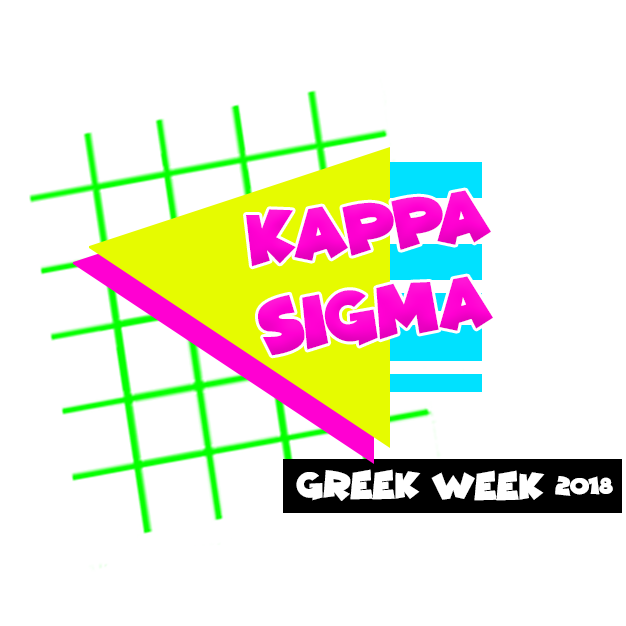
<style>
.page{position:relative;width:626px;height:626px;background:#ffffff}
.page>*{position:absolute;margin:0}
.t1{font:71.5px "ComicKings";color:#ff00d2;scale:0.97 1}
.t2{font:36px "ComicKings";color:#ffffff}
.t3{font:23px "ComicKings";color:#ffffff}
</style>
<div class="page">
<p class="t1" style="left:246px;top:190px;width:247px;height:166px;rotate:-6deg">Kappa<br>Sigma</p>
<p class="t2" style="left:296px;top:469px;width:249px;height:32px">greek week</p>
<p class="t3" style="left:555px;top:476px;width:58px;height:20px">2018</p>
</div>
